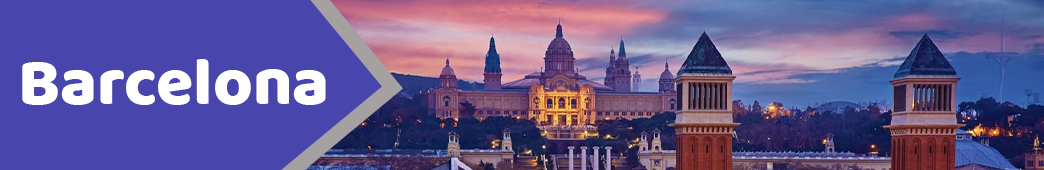
<style>
.page{position:relative;width:1044px;height:170px;background:#4845ad}
.page>*{position:absolute;margin:0}
.t1{font:68.2px "BalooBhai2-ExtraBold";color:#ffffff}
</style>
<div class="page">
<p class="t1" style="left:22px;top:59px;width:304px;height:46px">Barcelona</p>
</div>
